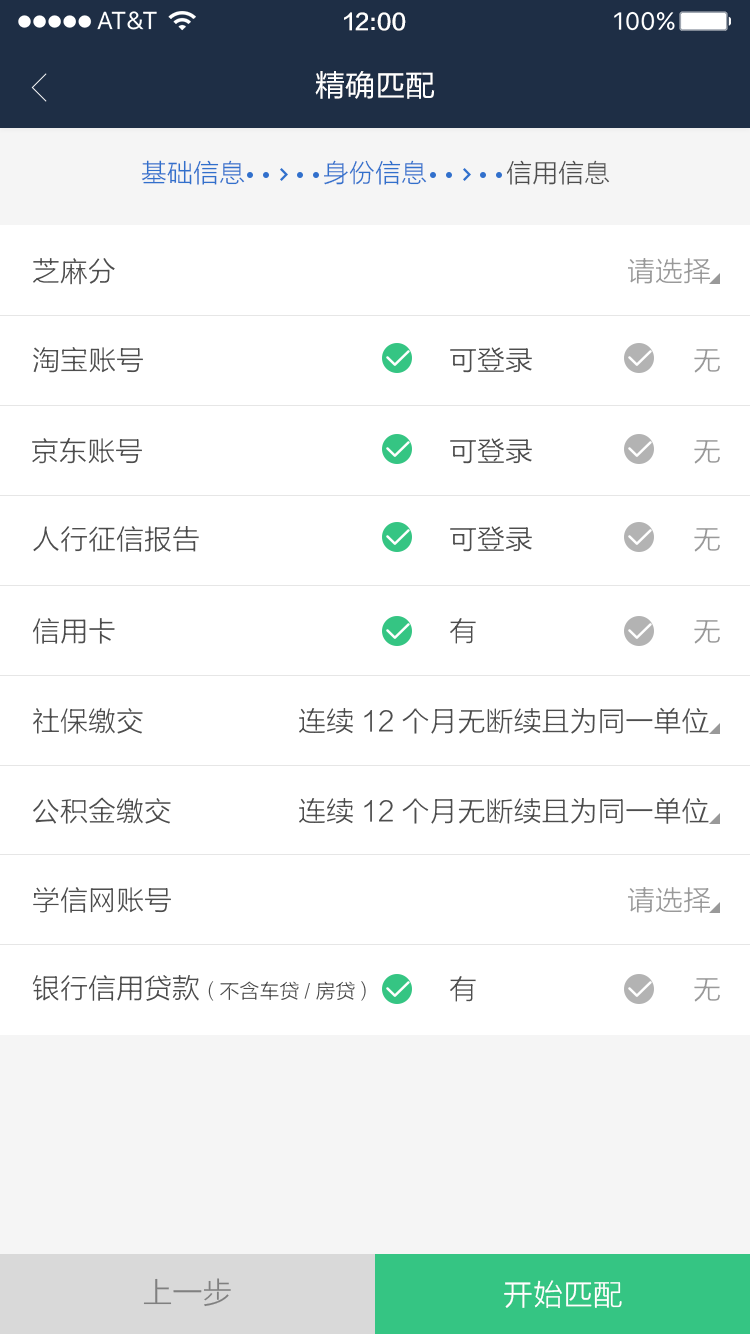
<style>
.page{position:relative;width:750px;height:1334px;background:#ffffff}
.page>*{position:absolute;margin:0}
.t1{font:22px "FZLTZHK--GBK1-0";color:#ffffff}
.t2{font:30px "FZLTHJW--GB1-0";color:#ffffff}
.t3{font:26px "FZLTXHK";color:#3170cc}
.t4{font:26px "FZLTXHK";color:#4d4d4d}
.t5{font:28px "FZLTXHK";color:#4d4d4d}
.t6{font:28px "FZLTXHK";color:#999999}
.t7{font:20px "FZLTXHK";color:#4d4d4d}
.t8{font:30px "FZLTXHK";color:#808080}
.t9{font:30px "FZLTXHK";color:#ffffff}
</style>
<div class="page">
<p class="t1" style="left:344px;top:12px;width:62px;height:19px">12:00</p>
<p class="t2" style="left:315px;top:71px;width:120px;height:28px">精确匹配</p>
<p class="t3" style="left:141px;top:160px;width:104px;height:25px">基础信息</p>
<p class="t3" style="left:324px;top:160px;width:103px;height:25px">身份信息</p>
<p class="t4" style="left:506px;top:160px;width:104px;height:25px">信用信息</p>
<p class="t5" style="left:33px;top:258px;width:82px;height:27px">芝麻分</p>
<p class="t6" style="left:628px;top:258px;width:82px;height:26px">请选择</p>
<p class="t5" style="left:33px;top:347px;width:110px;height:26px">淘宝账号</p>
<p class="t5" style="left:450px;top:347px;width:82px;height:26px">可登录</p>
<p class="t6" style="left:694px;top:349px;width:26px;height:24px">无</p>
<p class="t5" style="left:32px;top:437px;width:110px;height:27px">京东账号</p>
<p class="t5" style="left:450px;top:438px;width:82px;height:26px">可登录</p>
<p class="t6" style="left:694px;top:440px;width:26px;height:24px">无</p>
<p class="t5" style="left:33px;top:526px;width:166px;height:26px">人行征信报告</p>
<p class="t5" style="left:450px;top:526px;width:82px;height:26px">可登录</p>
<p class="t6" style="left:694px;top:528px;width:26px;height:24px">无</p>
<p class="t5" style="left:33px;top:618px;width:82px;height:26px">信用卡</p>
<p class="t5" style="left:450px;top:618px;width:26px;height:26px">有</p>
<p class="t6" style="left:694px;top:620px;width:26px;height:24px">无</p>
<p class="t5" style="left:33px;top:708px;width:110px;height:26px">社保缴交</p>
<p class="t5" style="left:299px;top:707px;width:410px;height:27px">连续12个月无断续且为同一单位</p>
<p class="t5" style="left:33px;top:797px;width:138px;height:27px">公积金缴交</p>
<p class="t5" style="left:299px;top:797px;width:410px;height:27px">连续12个月无断续且为同一单位</p>
<p class="t5" style="left:33px;top:887px;width:138px;height:26px">学信网账号</p>
<p class="t6" style="left:628px;top:887px;width:82px;height:26px">请选择</p>
<p class="t7" style="left:32px;top:975px;width:334px;height:26px"><span class="t5">银行信用贷款</span>（不含车贷/房贷）</p>
<p class="t5" style="left:450px;top:976px;width:26px;height:26px">有</p>
<p class="t6" style="left:694px;top:978px;width:26px;height:24px">无</p>
<p class="t8" style="left:143px;top:1278px;width:88px;height:29px">上一步</p>
<p class="t9" style="left:504px;top:1280px;width:118px;height:29px">开始匹配</p>
</div>
